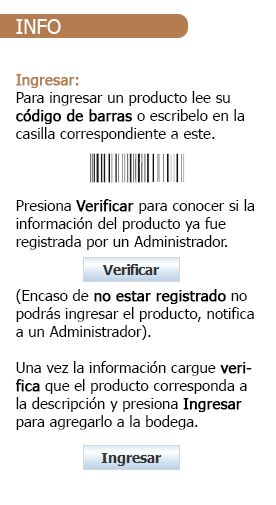
<style>
.page{position:relative;width:276px;height:505px;background:#ffffff}
.page>*{position:absolute;margin:0}
.t1{font:20px "Tahoma";color:#fcfbfb}
.t2{font:15px "Tahoma";color:#040000}
.t3{font:15px "Tahoma";color:#b57d4f;font-weight:bold}
.t4{font:15px "Tahoma";color:#040000;font-weight:bold}
</style>
<div class="page">
<p class="t1" style="left:16px;top:19px;width:45px;height:15px">INFO</p>
<p class="t2" style="left:15px;top:74px;width:240px;height:356px"><span class="t3">Ingresar:<br></span>Para ingresar un producto lee su <span class="t4">código de barras</span> o escribelo en la casilla correspondiente a este.<br><br><br><br>Presiona <span class="t4">Verificar </span>para conocer si la información del producto ya fue registrada por un Administrador.<br><br><br>(Encaso de <span class="t4">no estar registrado</span> no podrás ingresar el producto, notifica a un Administrador).<br><br>Una vez la información cargue <span class="t4">verifica</span> que el producto corresponda a la descripción y presiona <span class="t4">Ingresar</span> para agregarlo a la bodega.</p>
</div>
